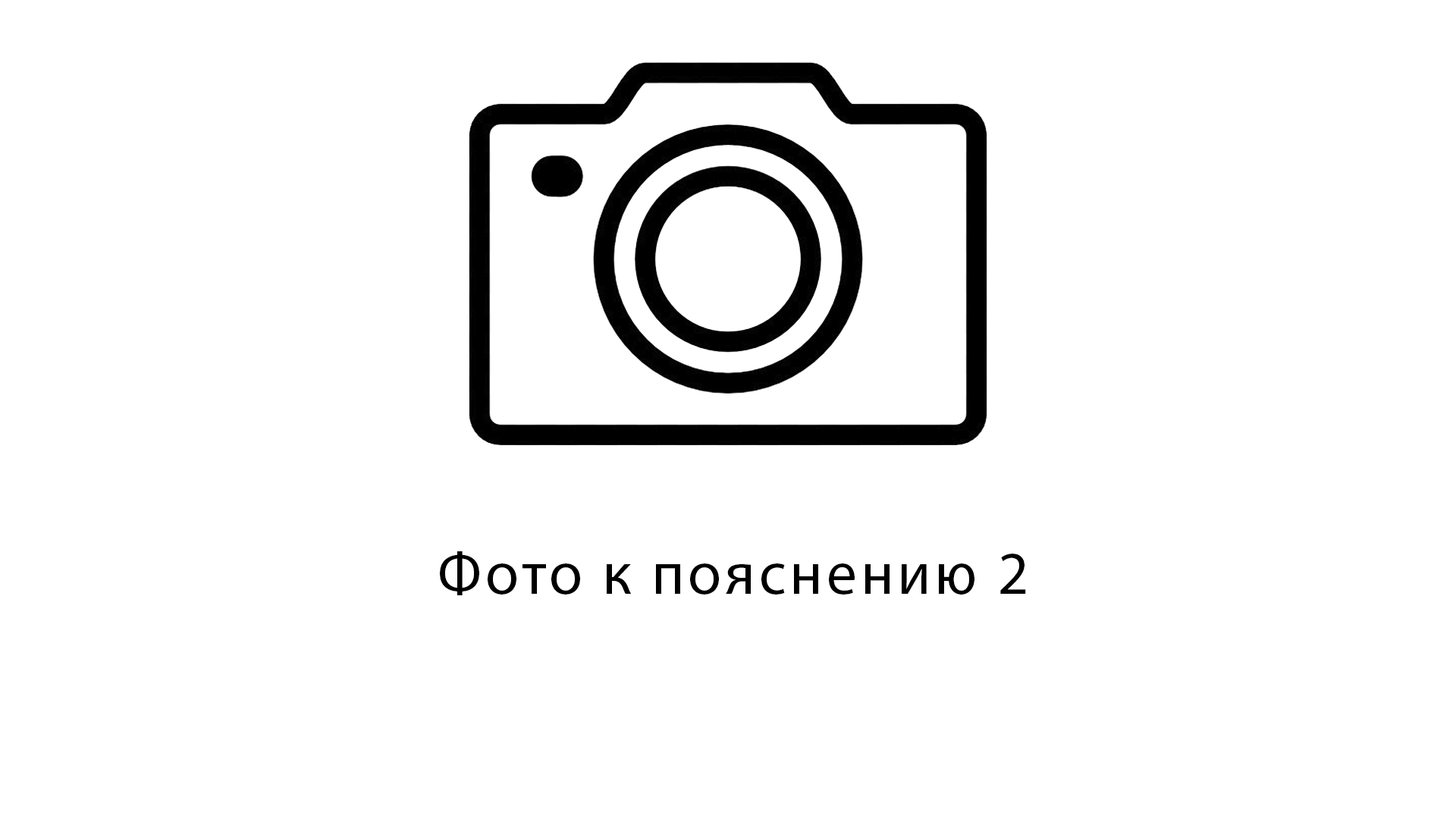
<style>
.page{position:relative;width:1456px;height:819px;background:#ffffff}
.page>*{position:absolute;margin:0}
.t1{font:60.7px "MyriadPro-Regular";letter-spacing:0.06em;color:#000000}
</style>
<div class="page">
<p class="t1" style="left:440px;top:551px;width:586px;height:44px">Фото к пояснению 2</p>
</div>
